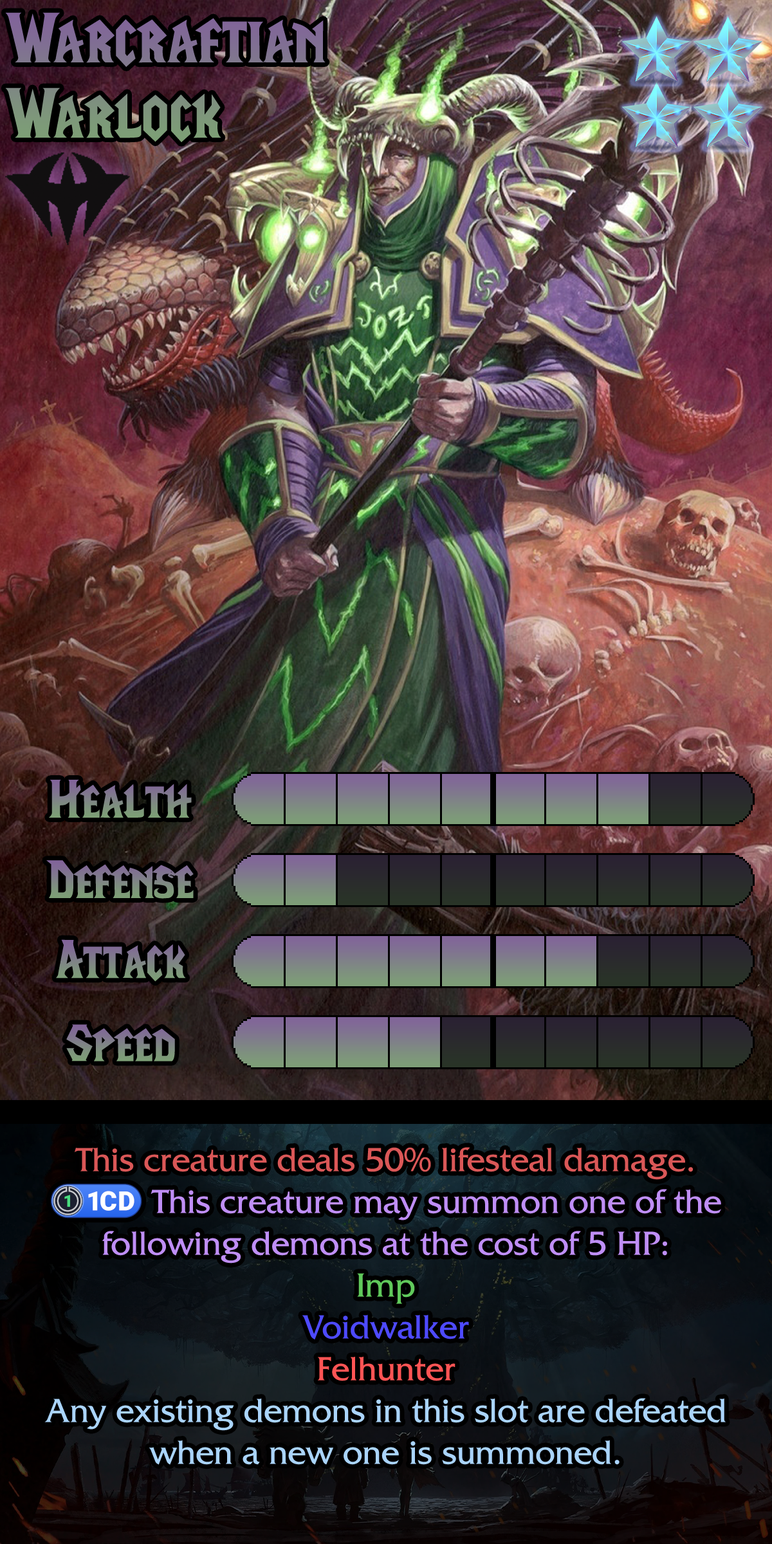
<style>
.page{position:relative;width:772px;height:1544px}
.page>*{position:absolute;margin:0}
.t1{font:121.6px/75.3px "LifeCraft"}
.t2{font:92.7px "LifeCraft"}
.t3{font:92.7px "LifeCraft";color:#7f8486}
.t4{font:59.8px/41.8px "FrizQuadrataStd";color:#bf8ef6}
.t5{font:59.8px/41.8px "FrizQuadrataStd";color:#da5757}
.t6{font:59.8px/41.8px "stoogedings-Regular";color:#bf8ef6}
.t7{font:59.8px/41.8px "FrizQuadrataStd";color:#60c95b}
.t8{font:59.8px/41.8px "FrizQuadrataStd";color:#4e4aff}
.t9{font:59.8px/41.8px "FrizQuadrataStd";color:#ff5454}
.t10{font:59.8px/41.8px "FrizQuadrataStd";color:#aad4fb}
</style>
<div class="page">
<p class="t1" style="left:5px;top:12px;width:321px;height:130px">Warcraftian <br>Warlock</p>
<p class="t2" style="left:49px;top:780px;width:143px;height:38px">Health</p>
<p class="t2" style="left:46px;top:860px;width:148px;height:39px">Defense</p>
<p class="t3" style="left:56px;top:939px;width:130px;height:43px">Attack</p>
<p class="t2" style="left:66px;top:1024px;width:109px;height:38px">Speed</p>
<p class="t4" style="left:44px;top:1147px;width:682px;height:318px;text-align:center"><span class="t5">This creature deals 50% lifesteal damage.<br></span><span class="t6">(1CD)</span> This creature may summon one of the following demons at the cost of 5 HP:<br><span class="t7">Imp<br></span><span class="t8">Voidwalker<br></span><span class="t9">Felhunter<br></span><span class="t10">Any existing demons in this slot are defeated when a new one is summoned.</span></p>
</div>
